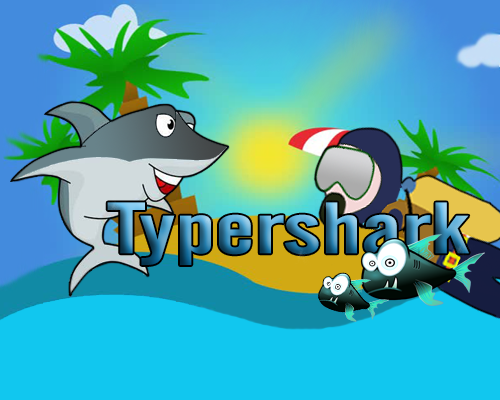
<style>
.page{position:relative;width:500px;height:400px;background:#11c7ef}
.page>*{position:absolute;margin:0}
.t1{font:71.6px "AlternateGothicNo2BT-Regular";scale:1.55 1}
</style>
<div class="page">
<p class="t1" style="left:107px;top:202px;width:362px;height:63px">Typershark</p>
</div>
